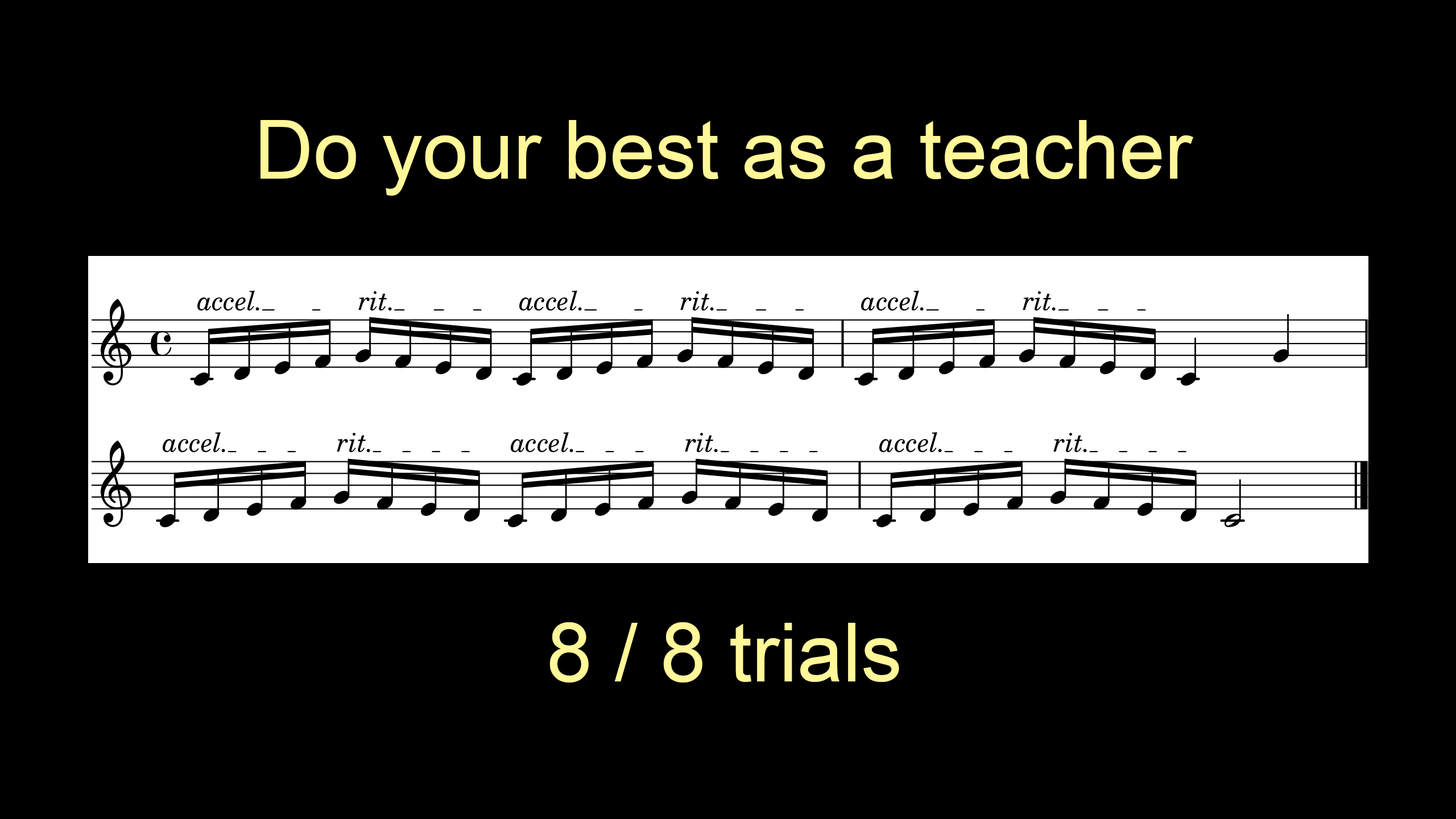
<style>
.page{position:relative;width:1456px;height:819px;background:#000000}
.page>*{position:absolute;margin:0}
.t1{font:81.9px "ArialMT";color:#fff799}
</style>
<div class="page">
<p class="t1" style="left:260px;top:120px;width:933px;height:76px">Do your best as a teacher</p>
<p class="t1" style="left:549px;top:622px;width:350px;height:60px">8 / 8 trials</p>
</div>
